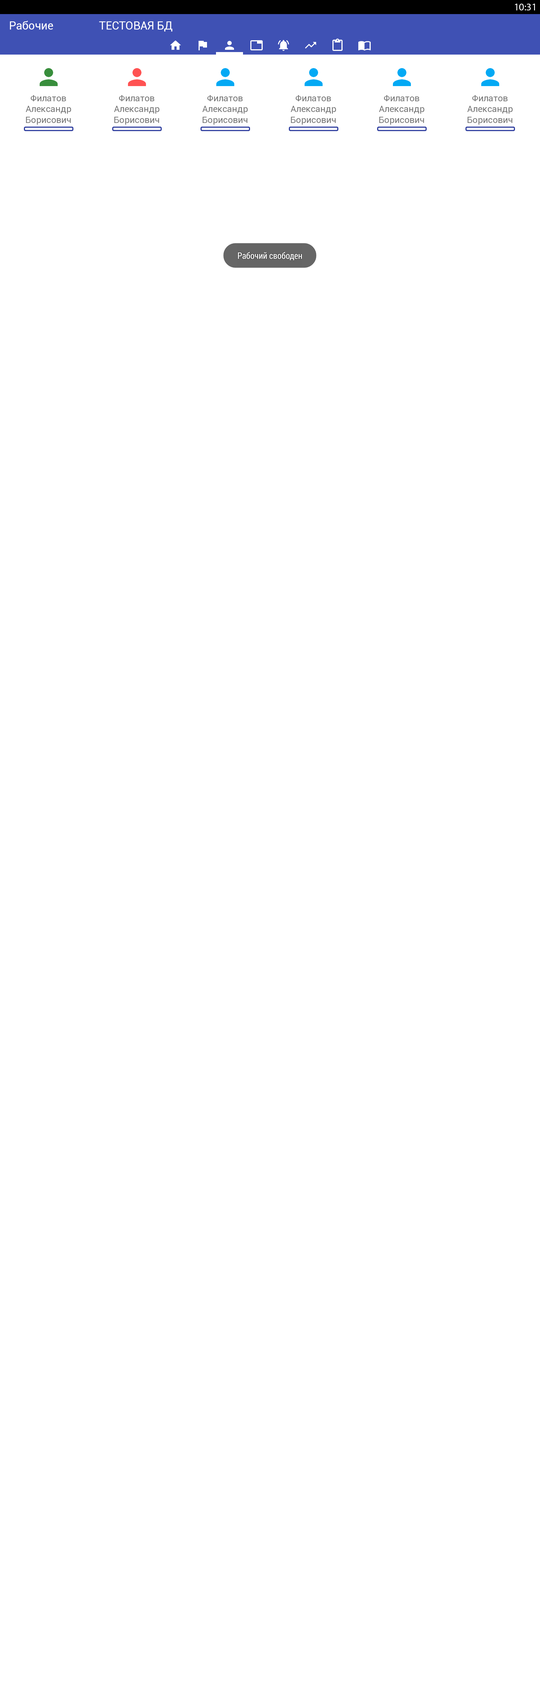
<style>
.page{position:relative;width:540px;height:1688px;background:#ffffff}
.page>*{position:absolute;margin:0}
.t1{font:10.1px "MyriadPro-Regular";color:#ffffff}
.t2{font:11.2px "Roboto-Regular";color:#ffffff}
.t3{font:9px "Roboto-Regular";color:#757575}
</style>
<div class="page">
<p class="t1" style="left:515px;top:4px;width:20px;height:6px">10:31</p>
<p class="t2" style="left:10px;top:21px;width:43px;height:9px">Рабочие</p>
<p class="t2" style="left:99px;top:21px;width:73px;height:11px">ТЕСТОВАЯ БД</p>
<p class="t3" style="left:26px;top:95px;width:45px;height:30px;text-align:center">Филатов<br>Александр<br>Борисович</p>
<p class="t3" style="left:114px;top:95px;width:45px;height:30px;text-align:center">Филатов<br>Александр<br>Борисович</p>
<p class="t3" style="left:202px;top:95px;width:46px;height:30px;text-align:center">Филатов<br>Александр<br>Борисович</p>
<p class="t3" style="left:291px;top:95px;width:45px;height:30px;text-align:center">Филатов<br>Александр<br>Борисович</p>
<p class="t3" style="left:379px;top:95px;width:45px;height:30px;text-align:center">Филатов<br>Александр<br>Борисович</p>
<p class="t3" style="left:467px;top:95px;width:46px;height:30px;text-align:center">Филатов<br>Александр<br>Борисович</p>
</div>
